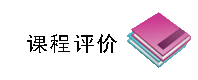
<style>
.page{position:relative;width:198px;height:80px;background:#ffffff}
.page>*{position:absolute;margin:0}
.t1{font:20.9px "SimHei";letter-spacing:0.05em;color:#050505;scale:1.03 1}
</style>
<div class="page">
<p class="t1" style="left:27px;top:34px;width:90px;height:19px">课程评价</p>
</div>
